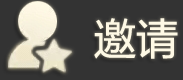
<style>
.page{position:relative;width:183px;height:80px;background:#333333}
.page>*{position:absolute;margin:0}
.t1{font:42px "MicrosoftYaHei";color:#fef9e5}
</style>
<div class="page">
<p class="t1" style="left:94px;top:18px;width:84px;height:41px">邀请</p>
</div>
